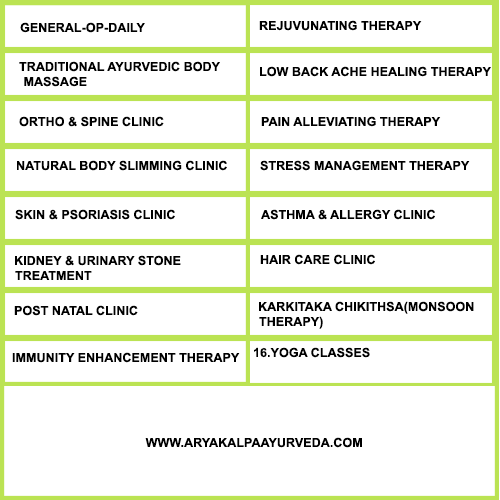
<style>
.page{position:relative;width:500px;height:500px;background:#ffffff}
.page>*{position:absolute;margin:0}
.t1{font:12.5px "Arial-BoldMT";letter-spacing:0.005em;color:#000000}
</style>
<div class="page">
<p class="t1" style="left:20px;top:22px;width:125px;height:11px">GENERAL-OP-DAILY</p>
<p class="t1" style="left:259px;top:20px;width:163px;height:11px">REJUVUNATING THERAPY</p>
<p class="t1" style="left:19px;top:61px;width:201px;height:26px">TRADITIONAL AYURVEDIC BODY<br> MASSAGE</p>
<p class="t1" style="left:260px;top:66px;width:231px;height:11px">LOW BACK ACHE HEALING THERAPY</p>
<p class="t1" style="left:19px;top:116px;width:145px;height:11px">ORTHO &amp; SPINE CLINIC</p>
<p class="t1" style="left:261px;top:116px;width:180px;height:11px">PAIN ALLEVIATING THERAPY</p>
<p class="t1" style="left:17px;top:160px;width:210px;height:11px">NATURAL BODY SLIMMING CLINIC</p>
<p class="t1" style="left:260px;top:160px;width:210px;height:11px">STRESS MANAGEMENT THERAPY</p>
<p class="t1" style="left:15px;top:209px;width:160px;height:11px">SKIN &amp; PSORIASIS CLINIC</p>
<p class="t1" style="left:261px;top:209px;width:174px;height:11px">ASTHMA &amp; ALLERGY CLINIC</p>
<p class="t1" style="left:15px;top:255px;width:166px;height:25px">KIDNEY &amp; URINARY STONE <br>TREATMENT</p>
<p class="t1" style="left:260px;top:254px;width:115px;height:11px">HAIR CARE CLINIC</p>
<p class="t1" style="left:14px;top:305px;width:124px;height:11px">POST NATAL CLINIC</p>
<p class="t1" style="left:259px;top:301px;width:215px;height:28px">KARKITAKA CHIKITHSA(MONSOON THERAPY)</p>
<p class="t1" style="left:12px;top:352px;width:228px;height:11px">IMMUNITY ENHANCEMENT THERAPY</p>
<p class="t1" style="left:254px;top:347px;width:116px;height:11px">16.YOGA CLASSES</p>
<p class="t1" style="left:145px;top:437px;width:217px;height:11px">WWW.ARYAKALPAAYURVEDA.COM</p>
</div>
